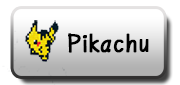
<style>
.page{position:relative;width:180px;height:85px;background:#ffffff}
.page>*{position:absolute;margin:0}
.t1{font:32.6px "WRTishKid";color:#000000;font-weight:bold}
</style>
<div class="page">
<p class="t1" style="left:68px;top:33px;width:81px;height:20px">Pikachu</p>
</div>
